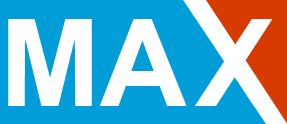
<style>
.page{position:relative;width:287px;height:124px;background:#009dd8}
.page>*{position:absolute;margin:0}
.t1{font:121.2px "Arial-BoldMT";color:#ffffff}
</style>
<div class="page">
<p class="t1" style="left:8px;top:19px;width:179px;height:87px">MA</p>
<p class="t1" style="left:194px;top:19px;width:81px;height:87px">X</p>
</div>
